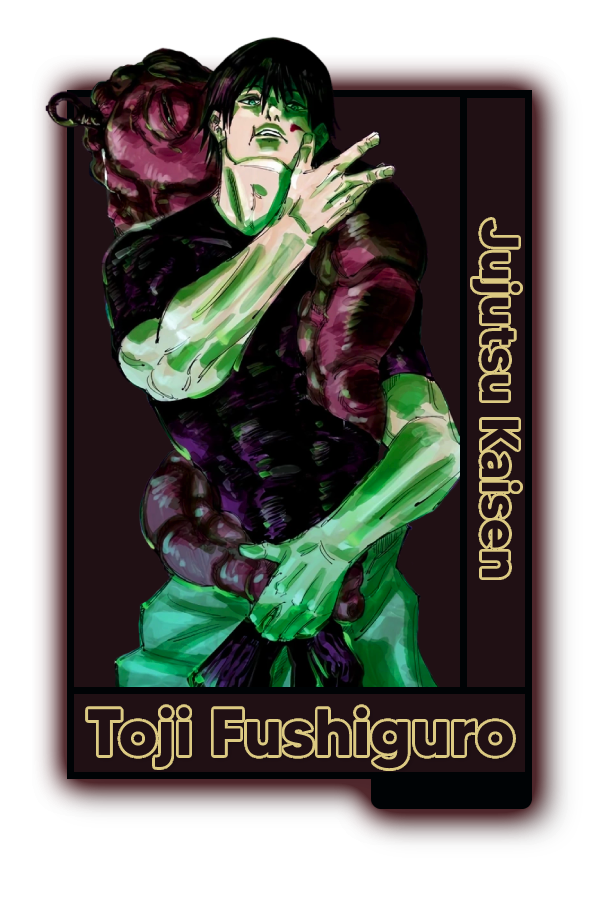
<style>
.page{position:relative;width:600px;height:900px}
.page>*{position:absolute;margin:0}
.t1{font:52px "MADETOMMY-Bold";color:#1e1214}
.t2{font:65.2px "MADETOMMY-Bold";color:#1e1214}
</style>
<div class="page">
<p class="t1" style="left:472px;top:219px;width:49px;height:359px;rotate:90deg">Jujutsu Kaisen</p>
<p class="t2" style="left:88px;top:707px;width:425px;height:62px">Toji Fushiguro</p>
</div>
